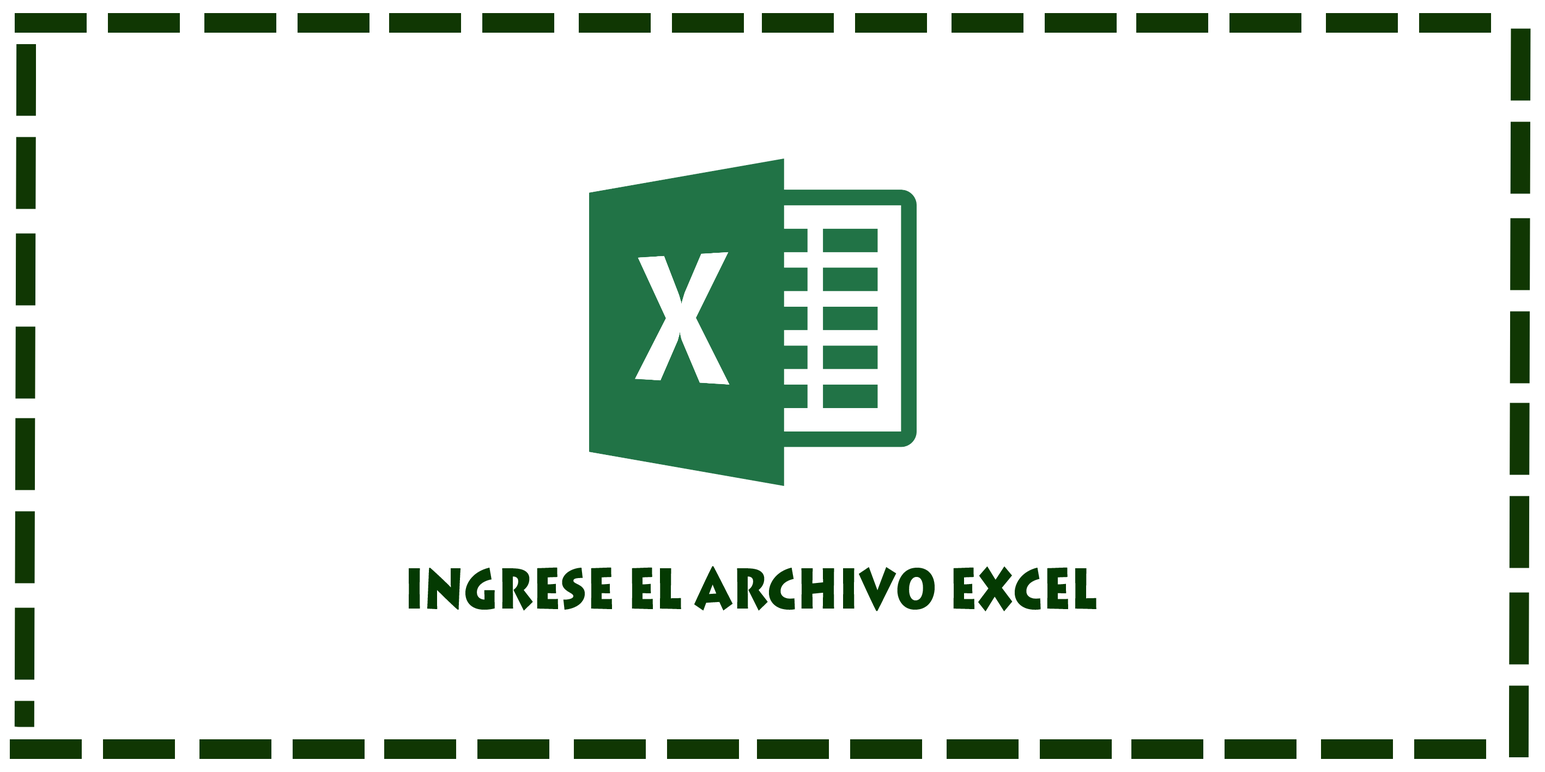
<style>
.page{position:relative;width:1545px;height:772px;background:#ffffff}
.page>*{position:absolute;margin:0}
.t1{font:66.5px "LithosPro-Black";color:#043a02;scale:0.75 1}
</style>
<div class="page">
<p class="t1" style="left:409px;top:566px;width:687px;height:45px">ingrese el archivo excel</p>
</div>
